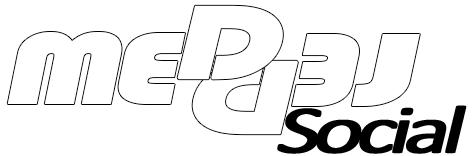
<style>
.page{position:relative;width:474px;height:156px;background:#ffffff}
.page>*{position:absolute;margin:0}
.t1{font:106.5px "Bauhaus93";letter-spacing:-0.099em;color:#ffffff;font-weight:bold;font-style:italic;scale:1.37 1}
.t2{font:108.6px "Bauhaus93";letter-spacing:-0.079em;color:#ffffff;scale:1.34 1}
.t3{font:68.3px "Calibri";letter-spacing:-0.099em;color:#000000;font-weight:bold;font-style:italic;scale:1.37 1}
</style>
<div class="page">
<p class="t1" style="left:177px;top:5px;width:106px;height:75px">D</p>
<p class="t2" style="left:7px;top:32px;width:178px;height:72px">ME</p>
<p class="t1" style="left:192px;top:60px;width:106px;height:75px;rotate:180deg">D</p>
<p class="t3" style="left:277px;top:105px;width:190px;height:49px">Social</p>
</div>
